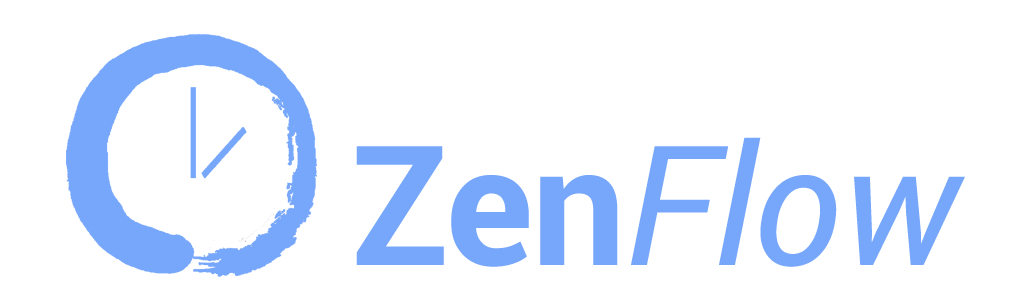
<style>
.page{position:relative;width:1012px;height:303px;background:#ffffff}
.page>*{position:absolute;margin:0}
.t1{font:166.7px "Roboto-Italic";letter-spacing:-0.01em;color:#77a7fb}
.t2{font:166.7px "Roboto-Bold";letter-spacing:-0.01em;color:#77a7fb}
</style>
<div class="page">
<p class="t1" style="left:356px;top:137px;width:609px;height:130px"><span class="t2">Zen</span>Flow</p>
</div>
